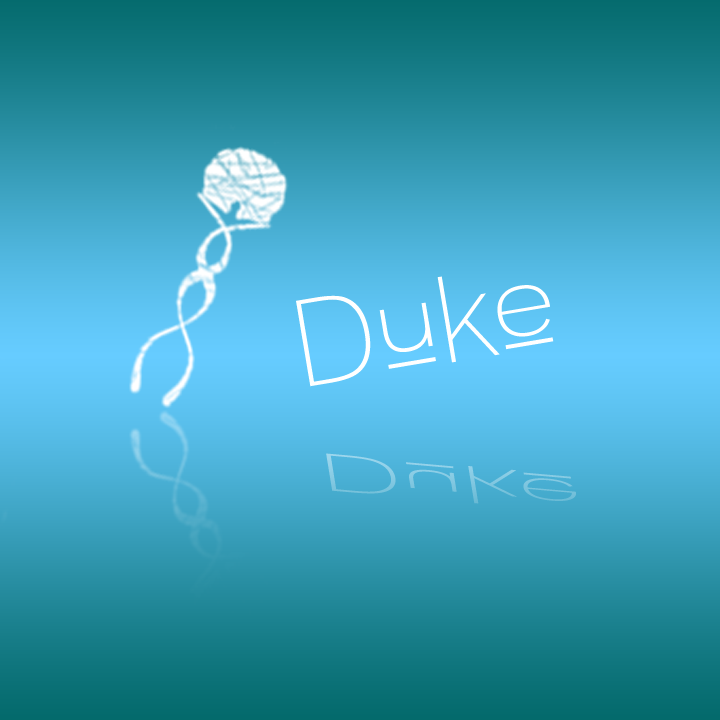
<style>
.page{position:relative;width:720px;height:720px}
.page>*{position:absolute;margin:0}
.t1{font:120px "Lane-Upper";color:#ffffff}
.t2{font:52px "Lane-Upper";color:#84c9e2;scale:2.29 1}
</style>
<div class="page">
<p class="t1" style="left:296px;top:276px;width:258px;height:111px;rotate:-10deg">Duke</p>
<p class="t2" style="left:326px;top:453px;width:250px;height:51px;rotate:5deg">Duke</p>
</div>
